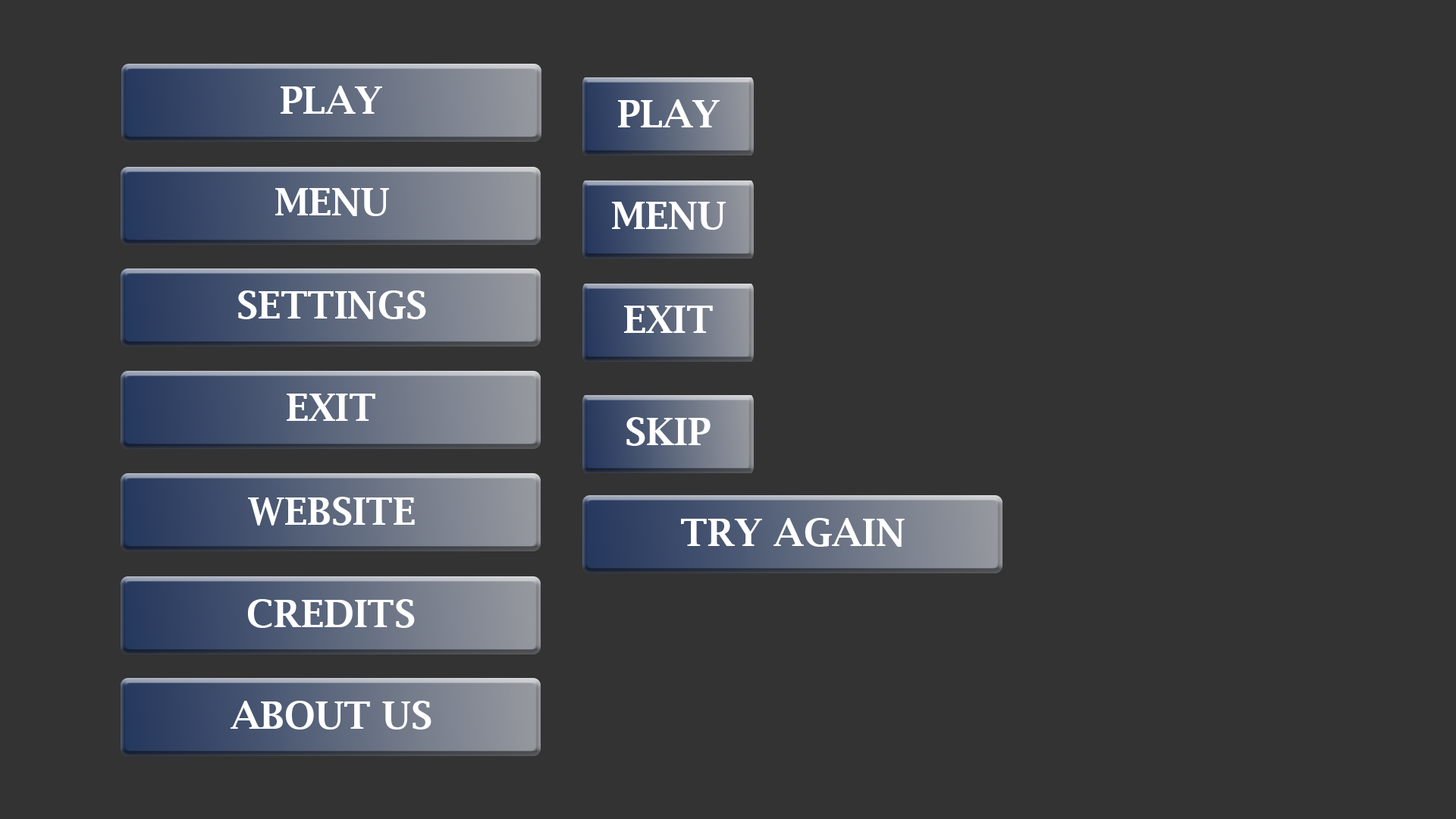
<style>
.page{position:relative;width:1456px;height:819px;background:#333333}
.page>*{position:absolute;margin:0}
.t1{font:37.9px "LucidaBright-Demi";color:#ffffff}
</style>
<div class="page">
<p class="t1" style="left:281px;top:86px;width:101px;height:28px">PLAY</p>
<p class="t1" style="left:618px;top:99px;width:102px;height:28px">PLAY</p>
<p class="t1" style="left:275px;top:188px;width:114px;height:28px">MENU</p>
<p class="t1" style="left:612px;top:202px;width:114px;height:28px">MENU</p>
<p class="t1" style="left:238px;top:290px;width:188px;height:29px">SETTINGS</p>
<p class="t1" style="left:624px;top:306px;width:89px;height:27px">EXIT</p>
<p class="t1" style="left:287px;top:394px;width:88px;height:27px">EXIT</p>
<p class="t1" style="left:626px;top:417px;width:85px;height:29px">SKIP</p>
<p class="t1" style="left:248px;top:497px;width:167px;height:29px">WEBSITE</p>
<p class="t1" style="left:681px;top:518px;width:224px;height:29px">TRY AGAIN</p>
<p class="t1" style="left:248px;top:599px;width:167px;height:29px">CREDITS</p>
<p class="t1" style="left:231px;top:701px;width:200px;height:29px">ABOUT US</p>
</div>
